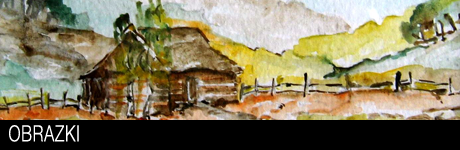
<style>
.page{position:relative;width:460px;height:150px}
.page>*{position:absolute;margin:0}
.t1{font:22.4px "HelveticaNeueCE-Light";letter-spacing:0.05em;color:#ffffff;scale:0.71 1}
</style>
<div class="page">
<p class="t1" style="left:9px;top:125px;width:70px;height:17px">OBRAZKI</p>
</div>
